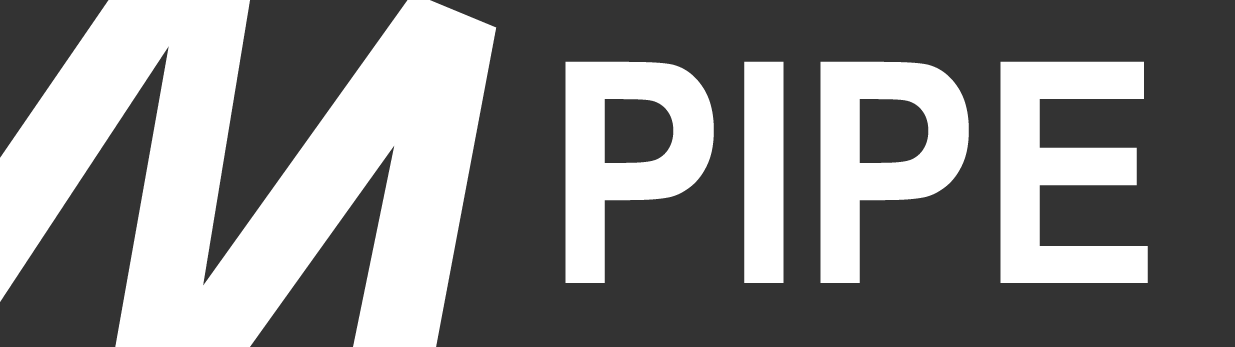
<style>
.page{position:relative;width:1235px;height:347px;background:#333333}
.page>*{position:absolute;margin:0}
.t1{font:307.8px "Arial-BoldMT";color:#ffffff;scale:0.88 1}
</style>
<div class="page">
<p class="t1" style="left:565px;top:61px;width:583px;height:222px">PIPE</p>
</div>
